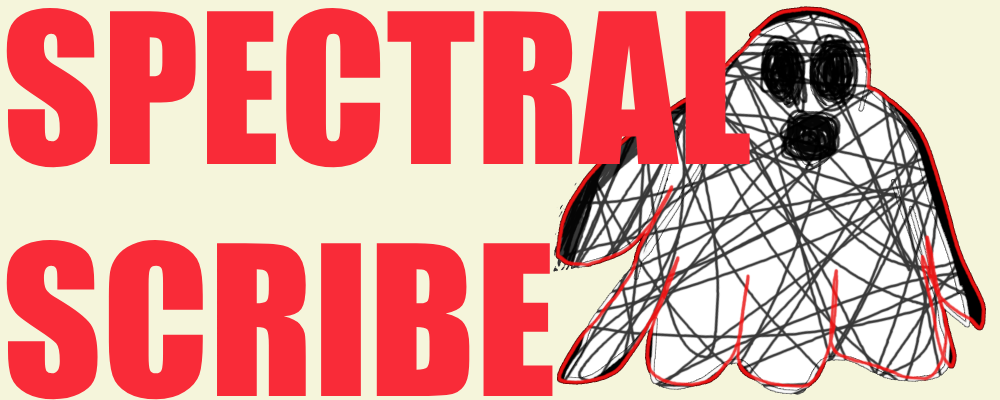
<style>
.page{position:relative;width:1000px;height:400px;background:#f5f5db}
.page>*{position:absolute;margin:0}
.t1{font:193.3px "Impact";color:#f92b38}
</style>
<div class="page">
<p class="t1" style="left:6px;top:8px;width:744px;height:392px">SPECTRAL <br>SCRIBE</p>
</div>
